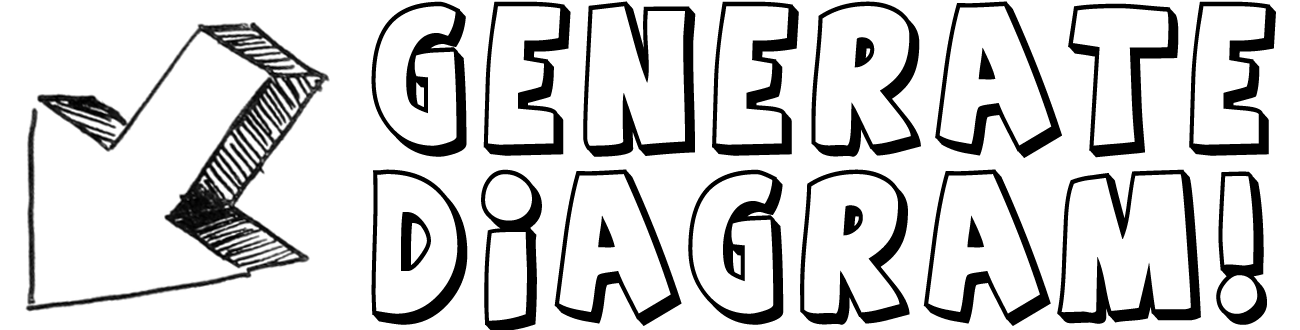
<style>
.page{position:relative;width:1300px;height:330px;background:#ffffff}
.page>*{position:absolute;margin:0}
.t1{font:140px "AgentOrange";letter-spacing:0.08em;color:#000000;scale:0.9 1}
</style>
<div class="page">
<p class="t1" style="left:371px;top:1px;width:905px;height:331px">GEnerate<br>diagram!</p>
</div>
